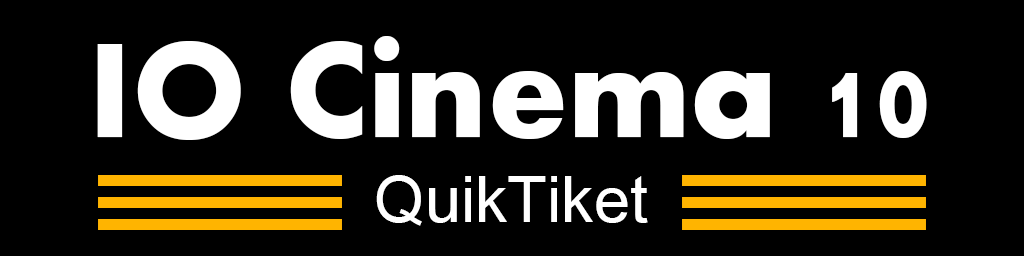
<style>
.page{position:relative;width:1024px;height:256px;background:#000000}
.page>*{position:absolute;margin:0}
.t1{font:140px "Aharoni-Bold";color:#ffffff}
.t2{font:72px "Miriam";color:#ffffff}
</style>
<div class="page">
<p class="t1" style="left:97px;top:36px;width:830px;height:104px">IO Cinema 10</p>
<p class="t2" style="left:376px;top:175px;width:272px;height:51px">QuikTiket</p>
</div>
